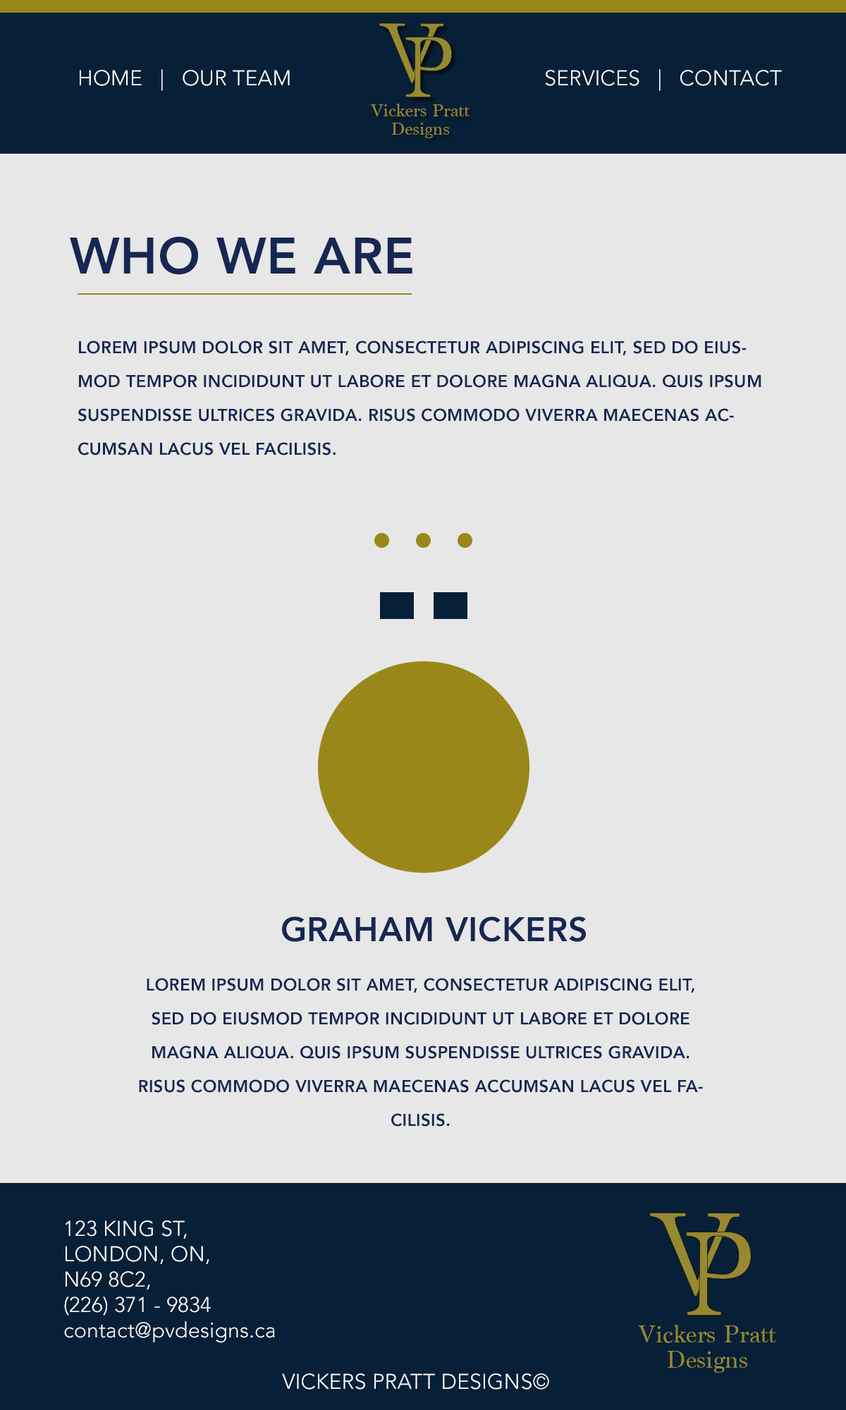
<style>
.page{position:relative;width:846px;height:1410px;background:#e7e7e7}
.page>*{position:absolute;margin:0}
.t1{font:21.1px "Avenir-Light";letter-spacing:0.01em;color:#ffffff;text-transform:uppercase}
.t2{font:50.8px "Avenir-Heavy";letter-spacing:0.01em;color:#162752;text-transform:uppercase}
.t3{font:16.9px/33.8px "Avenir-Heavy";letter-spacing:0.01em;color:#162752;text-transform:uppercase}
.t4{font:33.8px "Avenir-Heavy";letter-spacing:0.01em;color:#162752;text-transform:uppercase}
.t5{font:21.1px/25.4px "Avenir-Light";letter-spacing:0.01em;color:#ffffff}
.t6{font:21.1px/25.4px "Avenir-Light";letter-spacing:0.01em;color:#ffffff;text-transform:uppercase}
</style>
<div class="page">
<p class="t1" style="left:80px;top:69px;width:210px;height:22px">Home   |   Our team</p>
<p class="t1" style="left:545px;top:69px;width:237px;height:22px">services   |   Contact</p>
<p class="t2" style="left:70px;top:236px;width:342px;height:39px">Who we are</p>
<p class="t3" style="left:78px;top:340px;width:683px;height:115px">Lorem ipsum dolor sit amet, consectetur adipiscing elit, sed do eiusmod tempor incididunt ut labore et dolore magna aliqua. Quis ipsum suspendisse ultrices gravida. Risus commodo viverra maecenas accumsan lacus vel facilisis.</p>
<p class="t4" style="left:282px;top:916px;width:304px;height:26px">Graham Vickers</p>
<p class="t3" style="left:139px;top:978px;width:564px;height:148px;text-align:center">Lorem ipsum dolor sit amet, consectetur adipiscing elit, sed do eiusmod tempor incididunt ut labore et dolore magna aliqua. Quis ipsum suspendisse ultrices gravida. Risus commodo viverra maecenas accumsan lacus vel facilisis.</p>
<p class="t5" style="left:64px;top:1220px;width:211px;height:123px;text-align:justify"><span class="t6">123 King st,<br>london, on, <br>n69 8c2,<br></span>(226) 371 - 9834<br>contact@pvdesigns.ca</p>
<p class="t1" style="left:282px;top:1373px;width:267px;height:16px">Vickers Pratt designs©</p>
</div>
